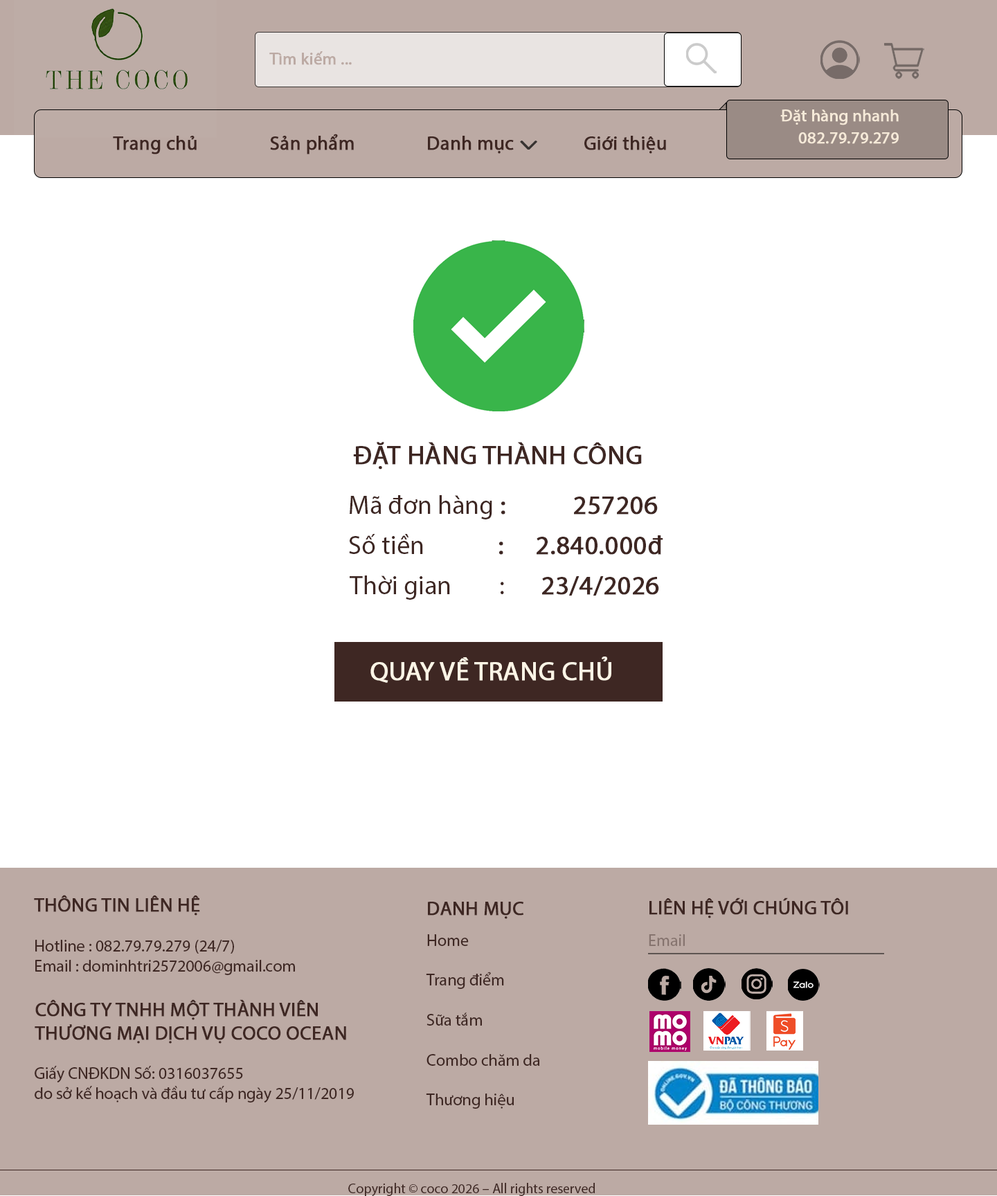
<style>
.page{position:relative;width:997px;height:1196px;background:#ffffff}
.page>*{position:absolute;margin:0}
.t1{font:16.6px "MyriadPro-Regular";color:#bcaaa4;font-weight:bold}
.t2{font:16.6px "MyriadPro-Regular";color:#f5e9d8;font-weight:bold}
.t3{font:19.4px "MyriadPro-Regular";color:#3e2723;font-weight:bold}
.t4{font:26.3px "MyriadPro-Regular";color:#3e2723;font-weight:bold}
.t5{font:26.3px "MyriadPro-Regular";color:#3e2723}
.t6{font:26.3px "MyriadPro-Regular";color:#fdf5e6;font-weight:bold}
.t7{font:16.6px "MyriadPro-Regular";color:#3e2723}
.t8{font:16.6px "MyriadPro-Regular";color:#86746f}
.t9{font:13.8px "MyriadPro-Regular";color:#3e2723}
</style>
<div class="page">
<p class="t1" style="left:269px;top:51px;width:83px;height:14px">Tìm kiếm ...</p>
<p class="t2" style="left:780px;top:109px;width:119px;height:16px">Đặt hàng nhanh</p>
<p class="t3" style="left:113px;top:136px;width:84px;height:18px">Trang chủ</p>
<p class="t3" style="left:270px;top:134px;width:84px;height:20px">Sản phẩm</p>
<p class="t3" style="left:428px;top:136px;width:86px;height:18px">Danh mục</p>
<p class="t3" style="left:584px;top:136px;width:82px;height:18px">Giới thiệu</p>
<p class="t2" style="left:798px;top:132px;width:101px;height:12px">082.79.79.279</p>
<p class="t4" style="left:353px;top:442px;width:289px;height:27px">ĐẶT HÀNG THÀNH CÔNG</p>
<p class="t5" style="left:350px;top:495px;width:308px;height:24px">Mã đơn hàng<span class="t4"> :    257206</span></p>
<p class="t4" style="left:349px;top:534px;width:314px;height:21px"><span class="t5">Số tiền</span>    :    2.840.000đ</p>
<p class="t5" style="left:350px;top:575px;width:309px;height:25px">Thời gian   :     <span class="t4">23/4/2026</span></p>
<p class="t6" style="left:370px;top:656px;width:241px;height:27px">QUAY VỀ TRANG CHỦ</p>
<p class="t7" style="left:34px;top:895px;width:261px;height:80px"><span class="t3">THÔNG TIN LIÊN HỆ <br><br></span>Hotline : 082.79.79.279 (24/7)<br>Email : dominhtri2572006@gmail.com</p>
<p class="t3" style="left:428px;top:902px;width:95px;height:17px">DANH MỤC</p>
<p class="t3" style="left:650px;top:897px;width:198px;height:21px">LIÊN HỆ VỚI CHÚNG TÔI</p>
<p class="t7" style="left:426px;top:934px;width:114px;height:175px">Home <br><br>Trang điểm <br><br>Sữa tắm <br><br>Combo chăm da<br><br>Thương hiệu</p>
<p class="t8" style="left:649px;top:934px;width:36px;height:12px">Email</p>
<p class="t3" style="left:35px;top:999px;width:311px;height:45px">CÔNG TY TNHH MỘT THÀNH VIÊN <br>THƯƠNG MẠI DỊCH VỤ COCO OCEAN</p>
<p class="t7" style="left:35px;top:1066px;width:319px;height:36px">Giấy CNĐKDN Số: 0316037655 <br>do sở kế hoạch và đầu tư cấp ngày 25/11/2019</p>
<p class="t9" style="left:348px;top:1183px;width:247px;height:13px">Copyright © coco 2026 – All rights reserved</p>
</div>
